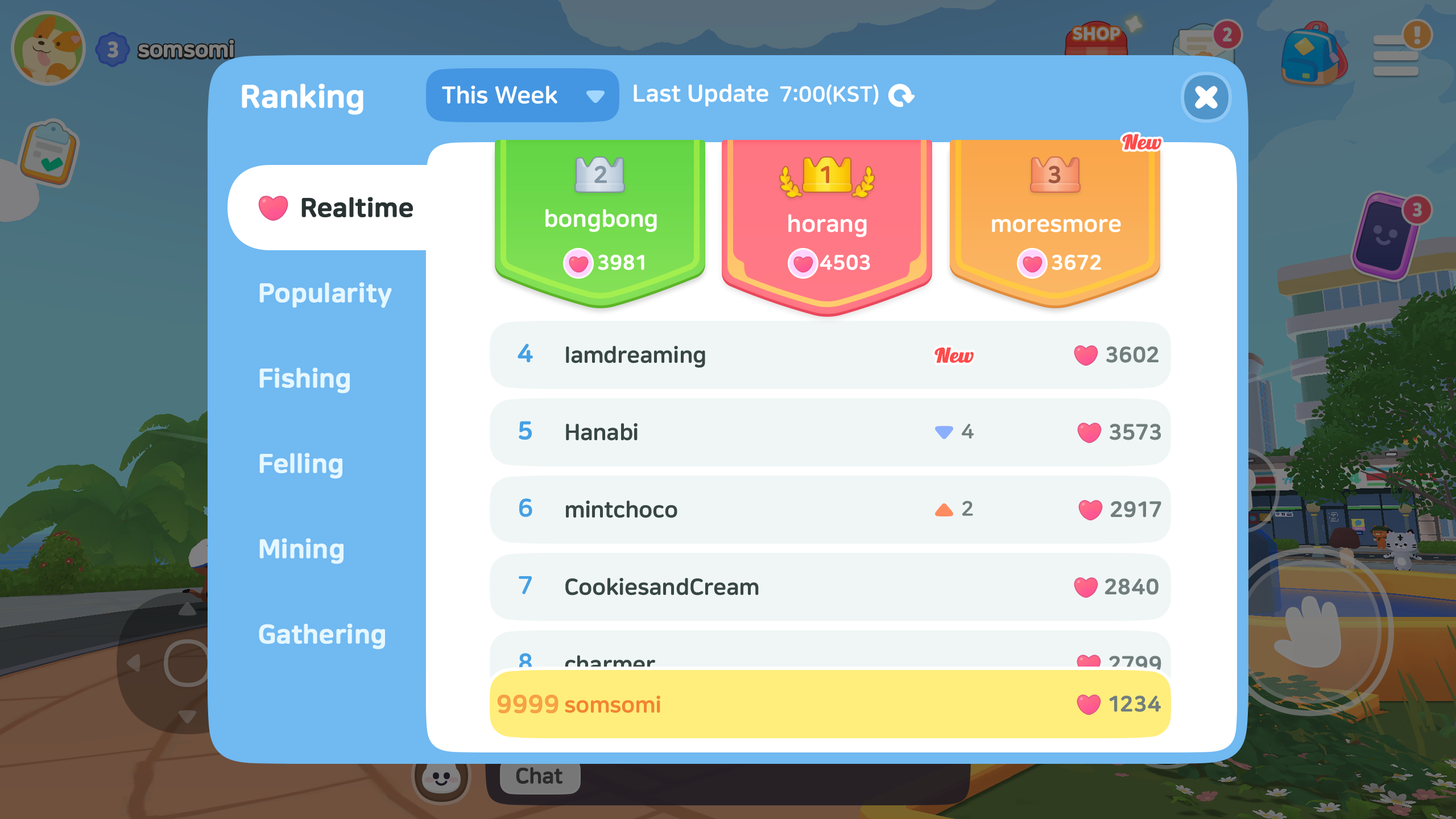
<style>
.page{position:relative;width:1456px;height:819px}
.page>*{position:absolute;margin:0}
.t1{font:31.8px "NanumSquareRoundEB";color:#ffffff;font-weight:bold}
.t2{font:23.9px "NanumSquareRoundEB";color:#ffffff}
.t3{font:24px "NanumSquareRoundEB";color:#ffffff}
.t4{font:21.6px "NanumSquareRoundEB";color:#ffffff}
.t5{font:19.5px "Lobster1.3";color:#ff4b4b;font-weight:bold;scale:1.11 1}
.t6{font:23.5px "NanumSquareRoundEB";color:#8396a5;font-weight:bold}
.t7{font:23.5px "NanumSquareRoundEB";color:#d16321;font-weight:bold}
.t8{font:23.5px "NanumSquareRoundEB";color:#9f5740;font-weight:bold}
.t9{font:26.2px "NanumSquareRoundEB";color:#283233;font-weight:bold}
.t10{font:20.5px "NanumSquareRoundEB";color:#ffffff;font-weight:bold}
.t11{font:26.2px "NanumSquareRoundEB";color:#e6f7ff;font-weight:bold}
.t12{font:25px "NanumSquareRoundEB";color:#46a0e4;font-weight:bold}
.t13{font:22.7px "NanumSquareRoundEB";color:#384742}
.t14{font:21.6px "NanumSquareRoundEB";color:#727e7e;font-weight:bold}
.t15{font:20.5px "NanumSquareRoundEB";color:#727e7e}
.t16{font:25px "NanumSquareRoundEB";color:#46a0e4}
.t17{font:22.7px "NanumSquareRoundEB"}
.t18{font:25px "NanumSquareRoundEB";color:#f6a146;font-weight:bold}
.t19{font:22.7px "NanumSquareRoundEB";color:#f28433}
</style>
<div class="page">
<p class="t1" style="left:242px;top:84px;width:121px;height:31px">Ranking</p>
<p class="t2" style="left:442px;top:85px;width:115px;height:19px">This Week</p>
<p class="t3" style="left:634px;top:84px;width:134px;height:23px">Last Update</p>
<p class="t4" style="left:780px;top:84px;width:99px;height:21px">7:00(KST)</p>
<p class="t5" style="left:1122px;top:134px;width:39px;height:16px">New</p>
<p class="t6" style="left:594px;top:166px;width:13px;height:17px">2</p>
<p class="t7" style="left:821px;top:166px;width:8px;height:17px">1</p>
<p class="t8" style="left:1048px;top:166px;width:13px;height:18px">3</p>
<p class="t9" style="left:301px;top:197px;width:112px;height:20px">Realtime</p>
<p class="t2" style="left:545px;top:209px;width:112px;height:23px">bongbong</p>
<p class="t2" style="left:788px;top:214px;width:79px;height:23px">horang</p>
<p class="t2" style="left:992px;top:219px;width:129px;height:14px">moresmore</p>
<p class="t10" style="left:598px;top:254px;width:46px;height:16px">3981</p>
<p class="t10" style="left:820px;top:254px;width:50px;height:16px">4503</p>
<p class="t10" style="left:1052px;top:254px;width:49px;height:16px">3672</p>
<p class="t11" style="left:259px;top:282px;width:133px;height:26px">Popularity</p>
<p class="t12" style="left:518px;top:344px;width:15px;height:18px">4</p>
<p class="t13" style="left:566px;top:346px;width:139px;height:22px">Iamdreaming</p>
<p class="t5" style="left:934px;top:348px;width:40px;height:15px">New</p>
<p class="t14" style="left:1106px;top:346px;width:53px;height:17px">3602</p>
<p class="t11" style="left:259px;top:367px;width:91px;height:27px">Fishing</p>
<p class="t12" style="left:519px;top:421px;width:13px;height:19px">5</p>
<p class="t13" style="left:566px;top:423px;width:72px;height:18px">Hanabi</p>
<p class="t15" style="left:961px;top:424px;width:13px;height:15px">4</p>
<p class="t14" style="left:1110px;top:424px;width:51px;height:16px">3573</p>
<p class="t11" style="left:259px;top:453px;width:83px;height:26px">Felling</p>
<p class="t16" style="left:519px;top:498px;width:13px;height:19px">6</p>
<p class="t13" style="left:566px;top:500px;width:111px;height:18px">mintchoco</p>
<p class="t15" style="left:962px;top:500px;width:11px;height:16px">2</p>
<p class="t14" style="left:1110px;top:501px;width:51px;height:17px">2917</p>
<p class="t11" style="left:259px;top:538px;width:85px;height:26px">Mining</p>
<p class="t16" style="left:519px;top:576px;width:13px;height:18px">7</p>
<p class="t13" style="left:565px;top:578px;width:194px;height:17px">CookiesandCream</p>
<p class="t14" style="left:1104px;top:578px;width:55px;height:17px">2840</p>
<p class="t11" style="left:259px;top:623px;width:126px;height:27px">Gathering</p>
<p class="t16" style="left:519px;top:653px;width:13px;height:19px">8</p>
<p class="t17" style="left:565px;top:655px;width:90px;height:18px">charmer</p>
<p class="t14" style="left:1108px;top:656px;width:53px;height:16px">2799</p>
<p class="t18" style="left:497px;top:694px;width:62px;height:20px">9999</p>
<p class="t19" style="left:565px;top:696px;width:95px;height:17px">somsomi</p>
<p class="t14" style="left:1109px;top:696px;width:52px;height:16px">1234</p>
</div>
